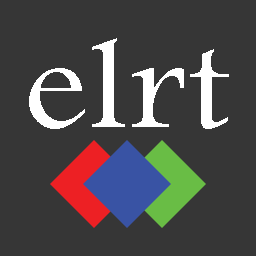
<style>
.page{position:relative;width:256px;height:256px;background:#363636}
.page>*{position:absolute;margin:0}
.t1{font:129.3px "FootlightMTLight";color:#ffffff;scale:1.12 1}
</style>
<div class="page">
<p class="t1" style="left:29px;top:38px;width:200px;height:91px">elrt</p>
</div>
